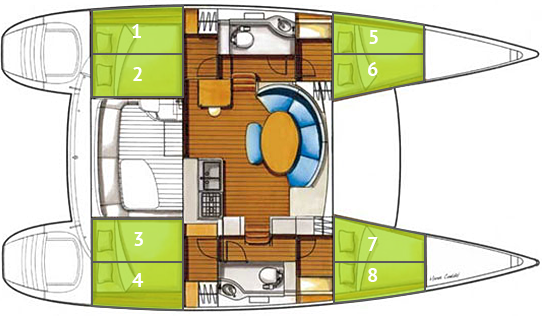
<style>
.page{position:relative;width:542px;height:316px;background:#ffffff}
.page>*{position:absolute;margin:0}
.t1{font:20px "PTSans-Bold";color:#ffffff}
</style>
<div class="page">
<p class="t1" style="left:132px;top:24px;width:9px;height:14px">1</p>
<p class="t1" style="left:369px;top:30px;width:9px;height:14px">5</p>
<p class="t1" style="left:368px;top:62px;width:10px;height:14px">6</p>
<p class="t1" style="left:133px;top:67px;width:9px;height:14px">2</p>
<p class="t1" style="left:134px;top:232px;width:9px;height:14px">3</p>
<p class="t1" style="left:368px;top:237px;width:10px;height:14px">7</p>
<p class="t1" style="left:368px;top:268px;width:10px;height:14px">8</p>
<p class="t1" style="left:132px;top:273px;width:12px;height:14px">4</p>
</div>
